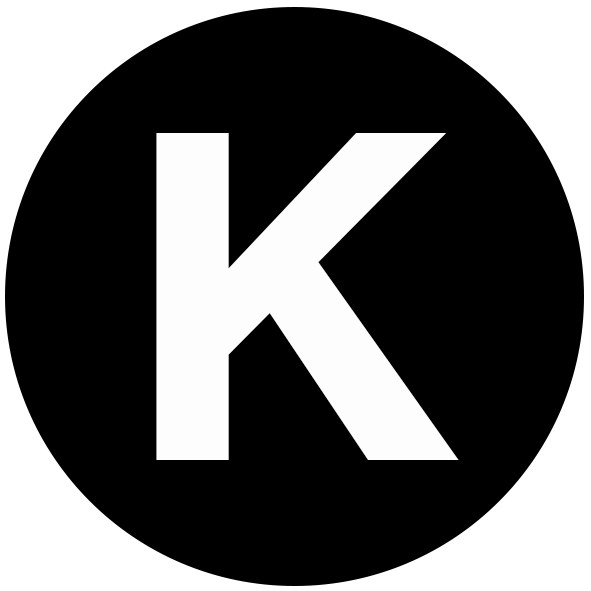
<style>
.page{position:relative;width:591px;height:591px;background:#000000}
.page>*{position:absolute;margin:0}
.t1{font:458.3px "HelveticaNeue-Bold";color:#fefdfd}
</style>
<div class="page">
<p class="t1" style="left:156px;top:133px;width:303px;height:327px">K</p>
</div>
